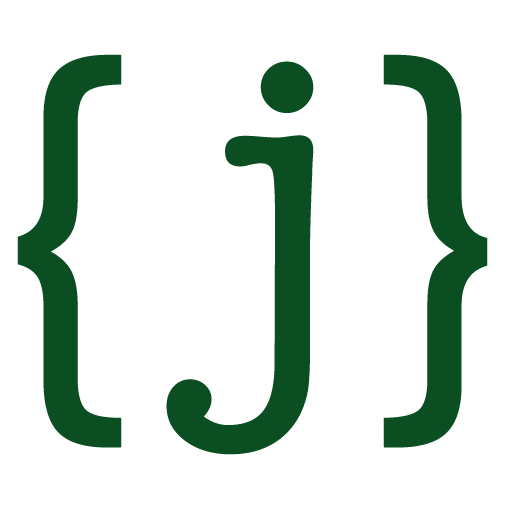
<style>
.page{position:relative;width:512px;height:512px;background:#ffffff}
.page>*{position:absolute;margin:0}
.t1{font:452px "AmericanTypewriter";color:#0b4e22;font-weight:bold}
</style>
<div class="page">
<p class="t1" style="left:17px;top:54px;width:471px;height:401px">{j}</p>
</div>
